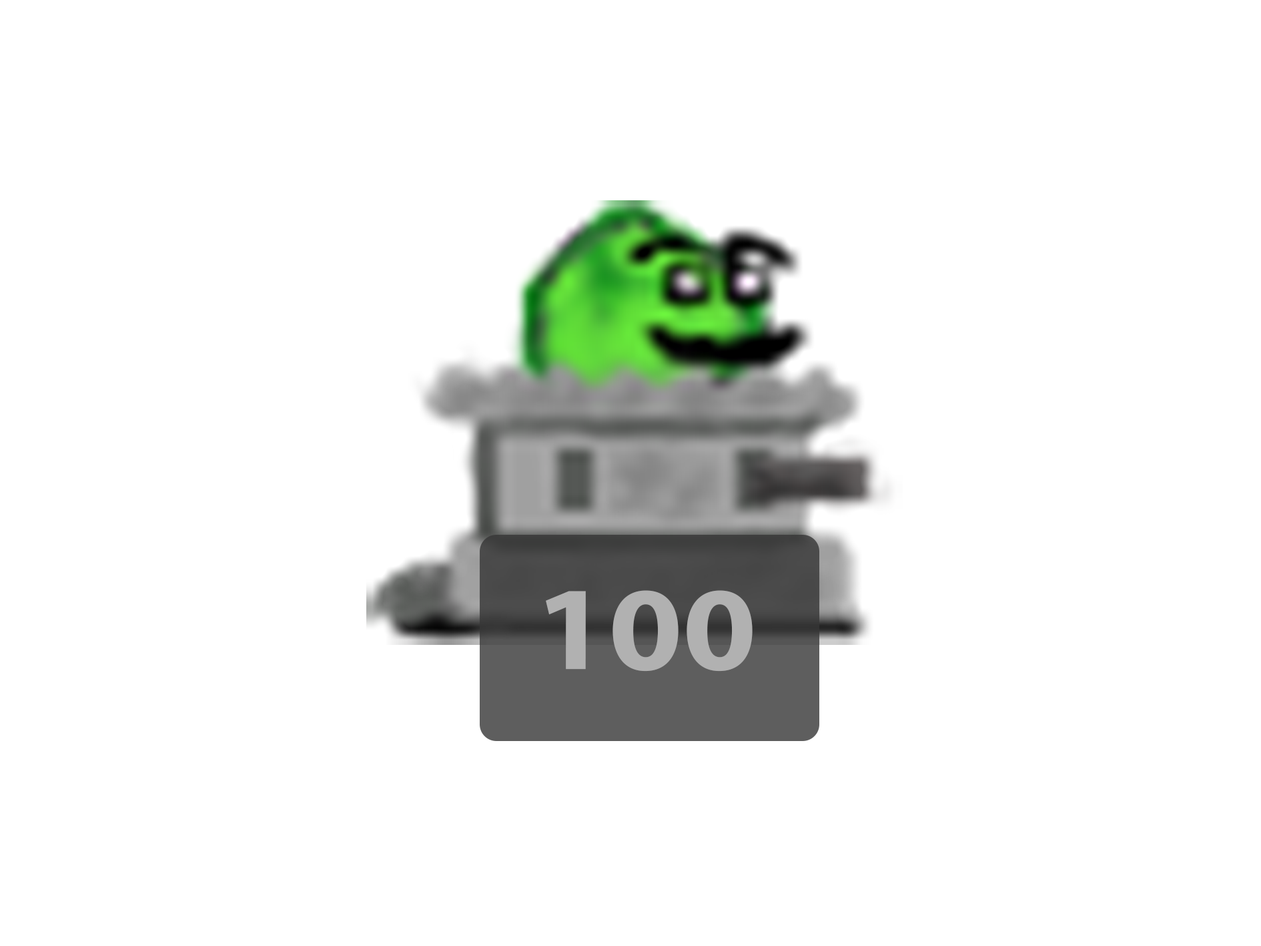
<style>
.page{position:relative;width:1261px;height:946px;background:#ffffff}
.page>*{position:absolute;margin:0}
.t1{font:119.7px "MyriadPro-Bold";color:#b1b1b1;scale:1.12 1}
</style>
<div class="page">
<p class="t1" style="left:546px;top:590px;width:207px;height:81px">100</p>
</div>
